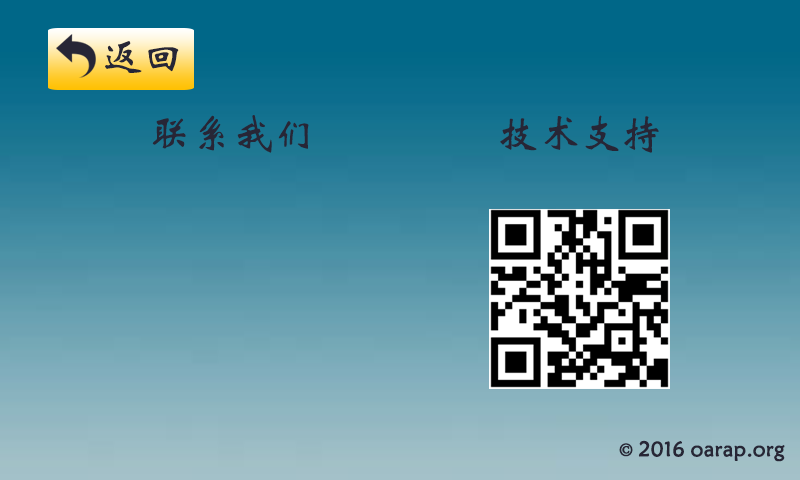
<style>
.page{position:relative;width:800px;height:480px}
.page>*{position:absolute;margin:0}
.t1{font:41.7px "STXinwei";color:#272636}
.t2{font:20.8px "STXinwei";color:#272636;font-weight:bold}
.t3{font:20.8px "AdobeSongStd-Light";color:#272636;font-weight:bold}
</style>
<div class="page">
<p class="t1" style="left:105px;top:41px;width:74px;height:32px">返回</p>
<p class="t1" style="left:152px;top:115px;width:157px;height:38px">联系我们</p>
<p class="t1" style="left:500px;top:115px;width:159px;height:38px">技术支持</p>
<p class="t2" style="left:619px;top:440px;width:166px;height:22px"><span class="t3">© </span>2016 oarap.org</p>
</div>
